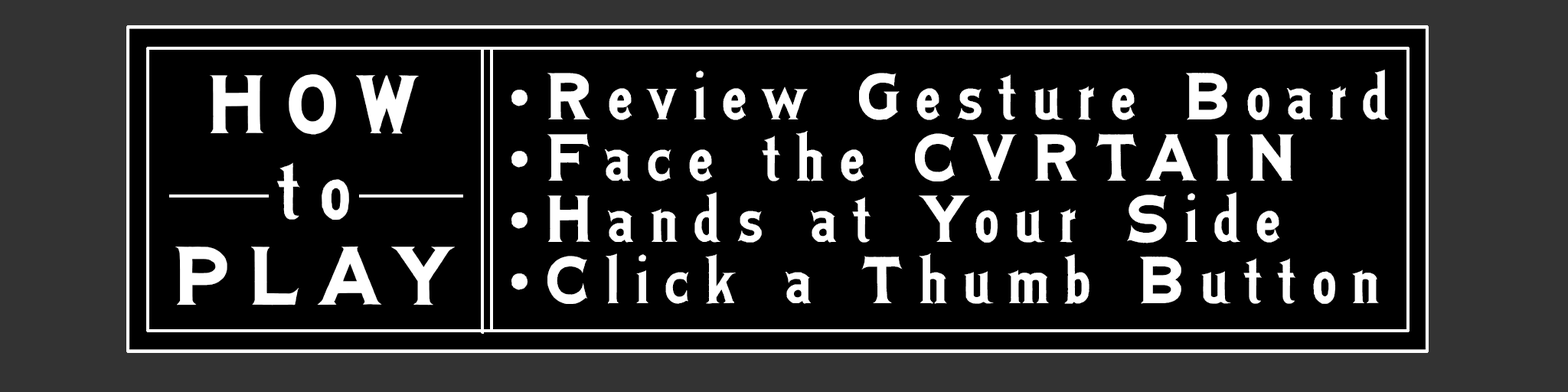
<style>
.page{position:relative;width:1568px;height:392px;background:#000000}
.page>*{position:absolute;margin:0}
.t1{font:91.9px/85.8px "JophetWF";letter-spacing:0.185em;color:#ffffff}
.t2{font:73.5px/61.2px "JophetWF";letter-spacing:0.185em;color:#ffffff}
</style>
<div class="page">
<p class="t1" style="left:175px;top:74px;width:281px;height:231px;text-align:center">HOW<br>to<br>PLAY</p>
<p class="t2" style="left:511px;top:69px;width:878px;height:235px">•Review Gesture Board<br>•Face the CVRTAIN<br>•Hands at Your Side<br>•Click a Thumb Button</p>
</div>
